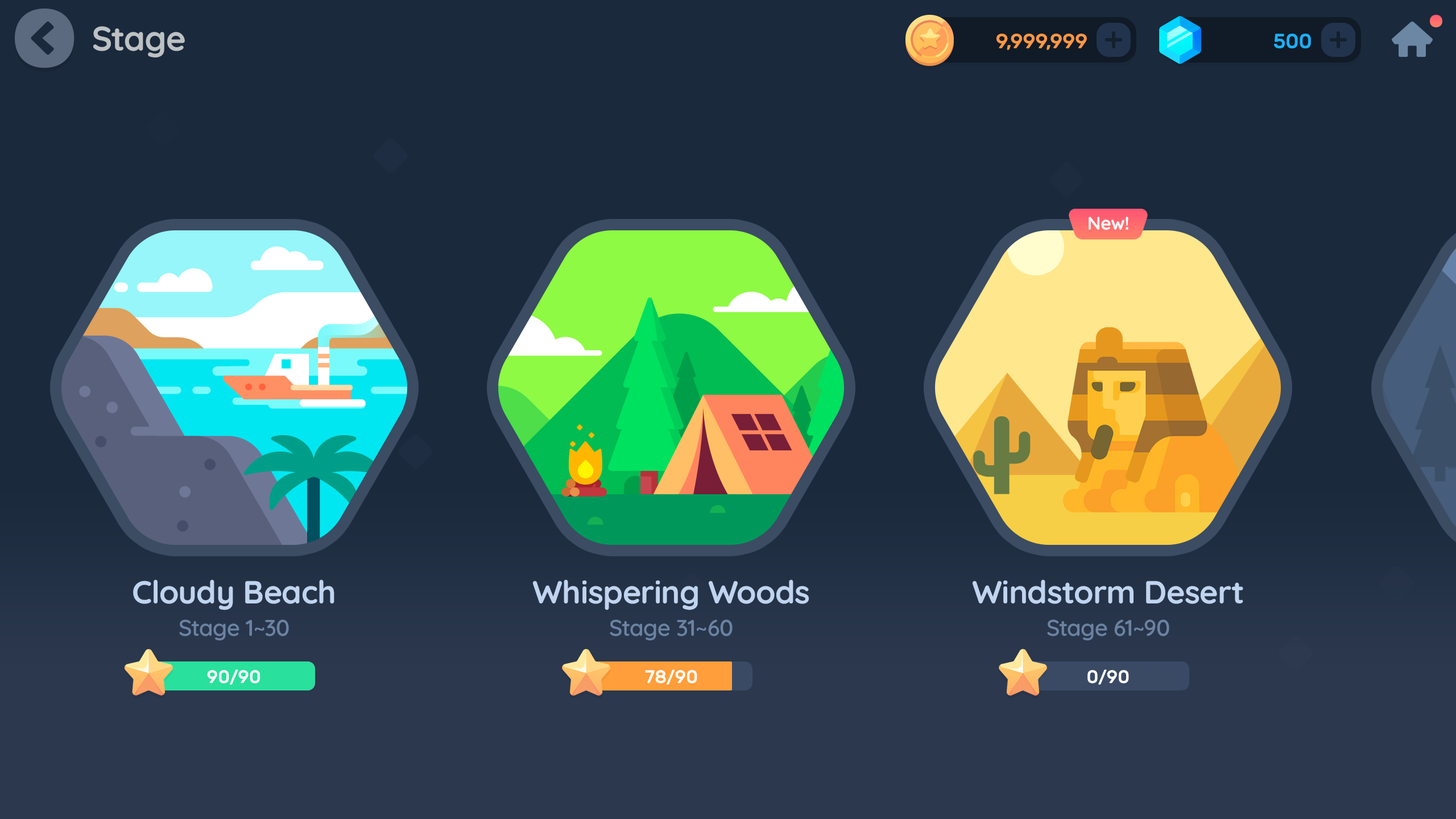
<style>
.page{position:relative;width:1456px;height:819px;background:#1a293c}
.page>*{position:absolute;margin:0}
.t1{font:34.1px "Quicksand-Bold";letter-spacing:-0.01em;color:#bdc1c4}
.t2{font:20.5px "Rubik-Medium";letter-spacing:-0.01em;color:#fd9744;text-transform:uppercase}
.t3{font:20.5px "Rubik-Medium";letter-spacing:-0.01em;color:#1cb0f6;text-transform:uppercase}
.t4{font:18.2px "Quicksand-Bold";letter-spacing:-0.01em;color:#ffffff}
.t5{font:31.8px "Quicksand-Bold";letter-spacing:-0.01em;color:#c0d4ef}
.t6{font:22.7px "Quicksand-SemiBold";letter-spacing:-0.01em;color:#6b83a2}
.t7{font:18.2px "Rubik-Medium";color:#ffffff;text-transform:uppercase}
.t8{font:17.1px "Rubik-Medium";color:#ffffff;text-transform:uppercase}
</style>
<div class="page">
<p class="t1" style="left:93px;top:26px;width:92px;height:31px">Stage</p>
<p class="t2" style="left:996px;top:34px;width:91px;height:16px">9,999,999</p>
<p class="t3" style="left:1274px;top:34px;width:37px;height:14px">500</p>
<p class="t4" style="left:1089px;top:217px;width:39px;height:13px">New!</p>
<p class="t5" style="left:133px;top:580px;width:201px;height:30px">Cloudy Beach</p>
<p class="t5" style="left:533px;top:580px;width:276px;height:30px">Whispering Woods</p>
<p class="t5" style="left:973px;top:580px;width:270px;height:24px">Windstorm Desert</p>
<p class="t6" style="left:179px;top:619px;width:110px;height:21px">Stage 1~30</p>
<p class="t6" style="left:610px;top:619px;width:123px;height:21px">Stage 31~60</p>
<p class="t6" style="left:1047px;top:619px;width:122px;height:21px">Stage 61~90</p>
<p class="t7" style="left:207px;top:669px;width:53px;height:16px">90<span class="t8">/</span>90</p>
<p class="t7" style="left:645px;top:669px;width:52px;height:16px">78<span class="t8">/</span>90</p>
<p class="t7" style="left:1087px;top:669px;width:42px;height:16px">0<span class="t8">/</span>90</p>
</div>
